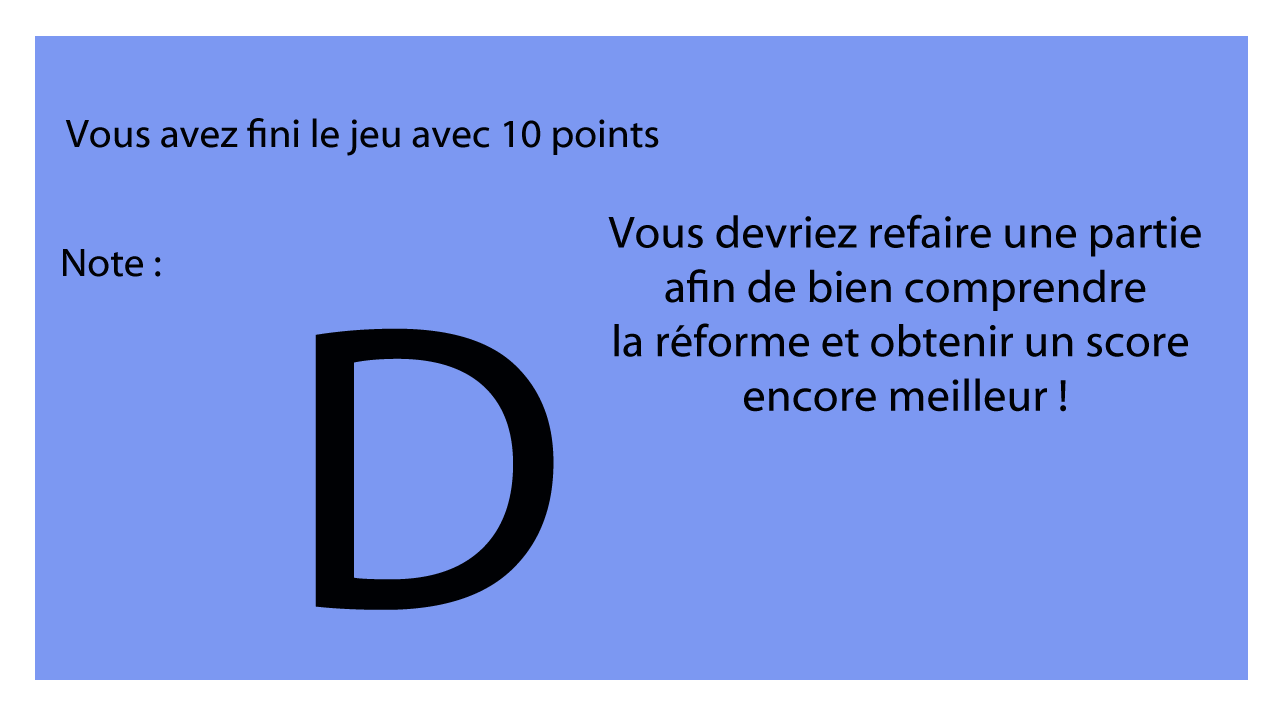
<style>
.page{position:relative;width:1280px;height:720px;background:#7c98f2}
.page>*{position:absolute;margin:0}
.t1{font:40px "MyriadWebPro";color:#000104}
.t2{font:45.3px "MyriadWebPro";color:#000104}
.t3{font:409.4px "MyriadWebPro";color:#000104}
</style>
<div class="page">
<p class="t1" style="left:65px;top:118px;width:594px;height:38px">Vous avez fini le jeu avec 10 points</p>
<p class="t2" style="left:608px;top:214px;width:593px;height:198px;text-align:center">Vous devriez refaire une partie<br>afin de bien comprendre<br>la réforme et obtenir un score <br>encore meilleur !</p>
<p class="t1" style="left:63px;top:249px;width:98px;height:28px">Note :</p>
<p class="t3" style="left:315px;top:328px;width:239px;height:282px">D</p>
</div>
